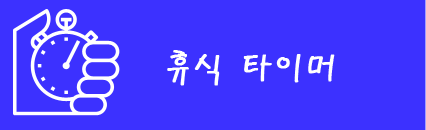
<style>
.page{position:relative;width:426px;height:130px;background:#3c31ff}
.page>*{position:absolute;margin:0}
.t1{font:37px "PyunjiR-HM";color:#fefefe;font-weight:bold;scale:0.97 1}
</style>
<div class="page">
<p class="t1" style="left:167px;top:50px;width:168px;height:36px">휴식 타이머</p>
</div>
